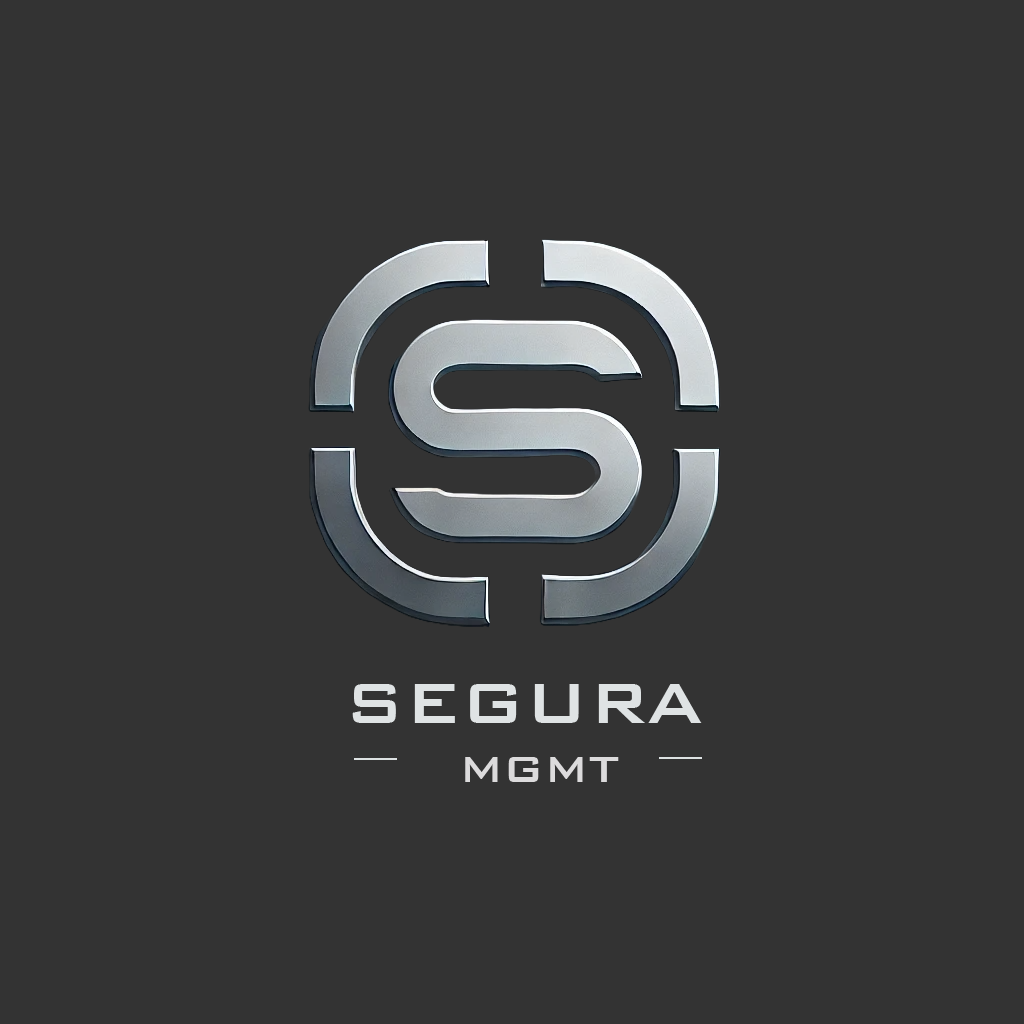
<style>
.page{position:relative;width:1024px;height:1024px;background:#333333}
.page>*{position:absolute;margin:0}
.t1{font:75px "BankGothicBT-Medium";color:#dfe3e4}
.t2{font:75px "BankGothicBT-Medium";color:#dcdbdc}
.t3{font:48px "BankGothicBT-Medium";color:#dcdbdc}
</style>
<div class="page">
<p class="t1" style="left:352px;top:684px;width:350px;height:39px"><span class="t2"> </span>SEGURA</p>
<p class="t3" style="left:465px;top:757px;width:154px;height:25px">MGMT</p>
</div>
